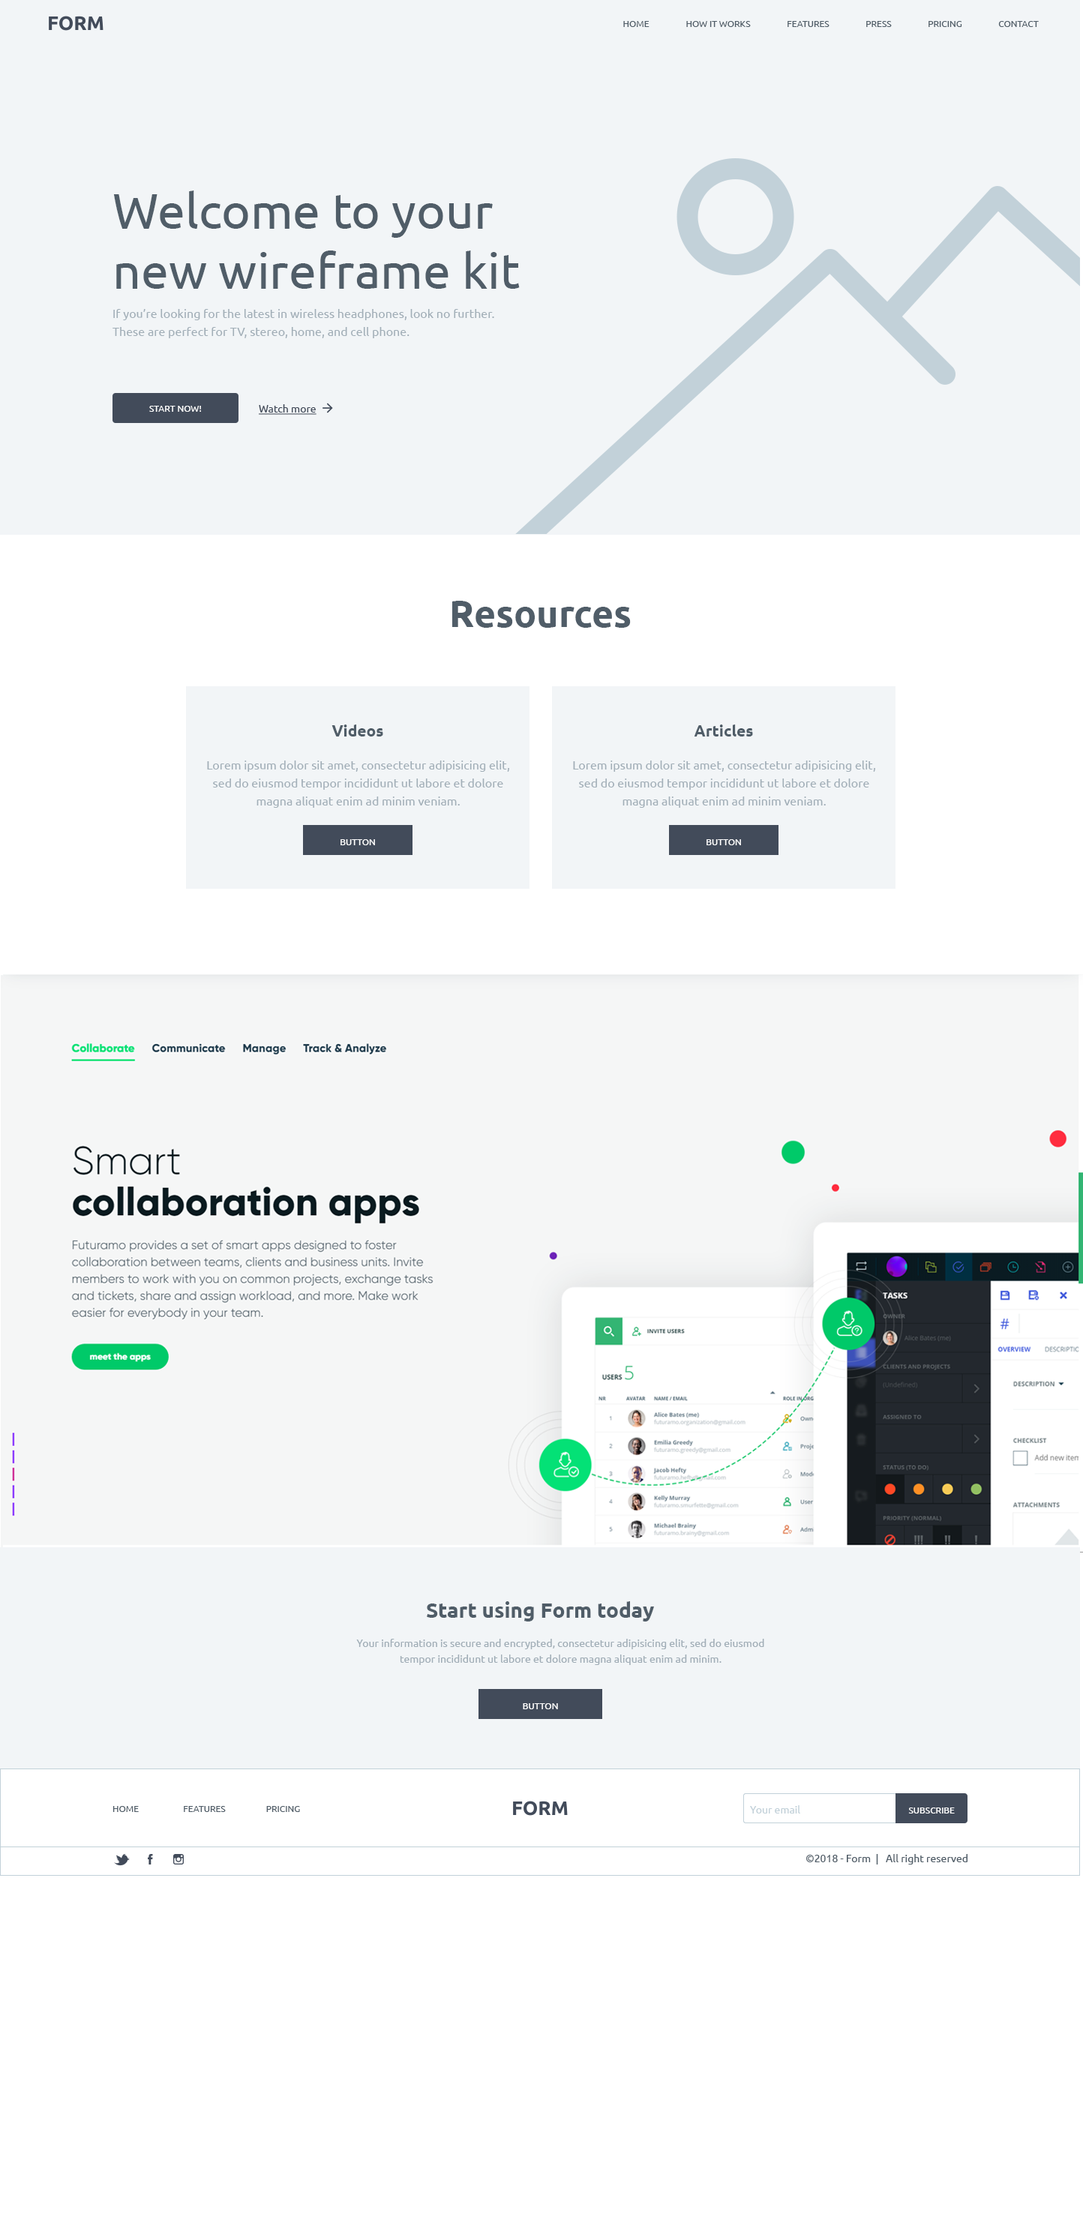
<style>
.page{position:relative;width:1083px;height:2226px;background:#ffffff}
.page>*{position:absolute;margin:0}
.t1{font:9px "Ubuntu";color:#505d68;text-transform:uppercase}
.t2{font:49.5px "Ubuntu";color:#505d68}
.t3{font:12px/18px "Ubuntu";color:#a1aeb7}
.t4{font:9px "Ubuntu";color:#ffffff;text-transform:uppercase}
.t5{font:10.5px "Ubuntu";color:#424b5a;text-decoration:underline}
.t6{font:37.5px "Ubuntu-Bold";color:#505d68}
.t7{font:15.8px "Ubuntu-Bold";color:#505d68}
.t8{font:21px "Ubuntu-Bold";color:#505d68}
.t9{font:10.5px/15.8px "Ubuntu";color:#a1aeb7}
.t10{font:10.5px "Ubuntu";color:#c2d1d9}
.t11{font:10.5px "Ubuntu";color:#505d68}
</style>
<div class="page">
<p class="t1" style="left:623px;top:21px;width:27px;height:6px">Home</p>
<p class="t1" style="left:686px;top:21px;width:65px;height:6px">How it works</p>
<p class="t1" style="left:788px;top:21px;width:42px;height:6px">Features</p>
<p class="t1" style="left:866px;top:21px;width:26px;height:6px">Press</p>
<p class="t1" style="left:928px;top:21px;width:34px;height:6px">Pricing</p>
<p class="t1" style="left:998px;top:21px;width:41px;height:6px">Contact</p>
<p class="t2" style="left:113px;top:190px;width:407px;height:99px">Welcome to your new wireframe kit</p>
<p class="t3" style="left:112px;top:309px;width:382px;height:29px">If you’re looking for the latest in wireless headphones, look no further. These are perfect for TV, stereo, home, and cell phone.</p>
<p class="t4" style="left:149px;top:406px;width:52px;height:6px">Start now!</p>
<p class="t5" style="left:259px;top:404px;width:57px;height:11px">Watch more</p>
<p class="t6" style="left:452px;top:601px;width:179px;height:27px">Resources</p>
<p class="t7" style="left:332px;top:724px;width:51px;height:12px">Videos</p>
<p class="t7" style="left:694px;top:724px;width:59px;height:12px">Articles</p>
<p class="t3" style="left:207px;top:760px;width:302px;height:48px;text-align:center">Lorem ipsum dolor sit amet, consectetur adipisicing elit, sed do eiusmod tempor incididunt ut labore et dolore magna aliquat enim ad minim veniam.</p>
<p class="t3" style="left:573px;top:760px;width:302px;height:48px;text-align:center">Lorem ipsum dolor sit amet, consectetur adipisicing elit, sed do eiusmod tempor incididunt ut labore et dolore magna aliquat enim ad minim veniam.</p>
<p class="t4" style="left:340px;top:839px;width:35px;height:6px">Button</p>
<p class="t4" style="left:706px;top:839px;width:35px;height:6px">Button</p>
<p class="t8" style="left:427px;top:1601px;width:227px;height:21px">Start using Form today</p>
<p class="t9" style="left:356px;top:1639px;width:408px;height:26px;text-align:center">Your information is secure and encrypted, consectetur adipisicing elit, sed do eiusmod tempor incididunt ut labore et dolore magna aliquat enim ad minim.</p>
<p class="t4" style="left:523px;top:1703px;width:35px;height:6px">Button</p>
<p class="t1" style="left:112px;top:1806px;width:27px;height:6px">Home</p>
<p class="t1" style="left:184px;top:1806px;width:42px;height:6px">Features</p>
<p class="t1" style="left:266px;top:1806px;width:34px;height:6px">Pricing</p>
<p class="t10" style="left:750px;top:1805px;width:50px;height:9px">Your email</p>
<p class="t4" style="left:908px;top:1808px;width:47px;height:6px">Subscribe</p>
<p class="t11" style="left:806px;top:1854px;width:162px;height:10px">©2018 - Form  |   All right reserved</p>
</div>
